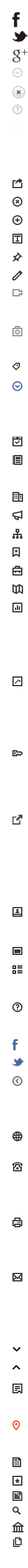
<style>
.page{position:relative;width:28px;height:1568px;background:#ffffff}
.page>*{position:absolute;margin:0}
.t1{font:14.8px "SSSocialRegular";color:#383839}
</style>
<div class="page">
<p class="t1" style="left:12px;top:49px;width:15px;height:14px">Google +</p>
</div>
